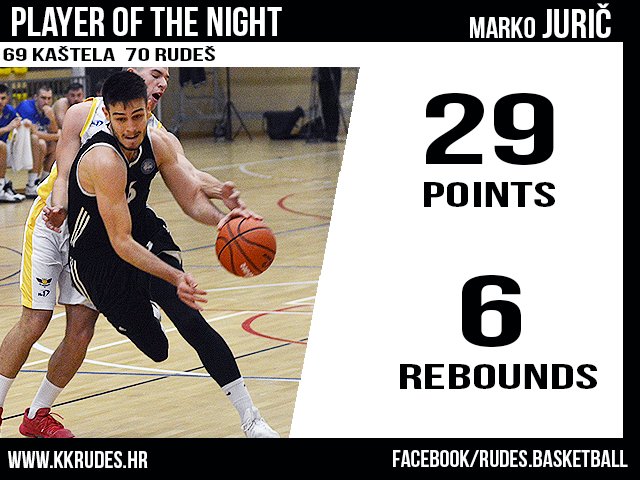
<style>
.page{position:relative;width:640px;height:480px;background:#ffffff}
.page>*{position:absolute;margin:0}
.t1{font:30px "BebasNeue";color:#ffffff;scale:1.04 1}
.t2{font:40.8px "BebasNeue";color:#ffffff;scale:1.04 1}
.t3{font:17.6px "BebasNeue";color:#000102;scale:1.77 1}
.t4{font:36px "BebasNeue";color:#000102;scale:1.77 1}
.t5{font:100px "BebasNeue";color:#000102;scale:1.77 1}
.t6{font:24px "BebasNeue";color:#ffffff;scale:1.04 1}
.t7{font:23.5px "BebasNeue";color:#ffffff;scale:1.06 1}
</style>
<div class="page">
<p class="t1" style="left:470px;top:3px;width:141px;height:35px">MARKO<span class="t2"> JURIČ</span></p>
<p class="t2" style="left:12px;top:7px;width:270px;height:29px">PLAYER OF THE NIGHT</p>
<p class="t3" style="left:3px;top:46px;width:212px;height:15px">69 KAŠTELA  70 RUDEŠ</p>
<p class="t4" style="left:424px;top:93px;width:131px;height:114px;text-align:center"><span class="t5">29<br></span>POINTS</p>
<p class="t4" style="left:400px;top:275px;width:197px;height:114px;text-align:center"><span class="t5">6 <br></span>REBOUNDS</p>
<p class="t6" style="left:8px;top:451px;width:140px;height:17px">www.kkrudes.hr</p>
<p class="t7" style="left:393px;top:450px;width:235px;height:17px">facebook/rudes.basketball</p>
</div>
